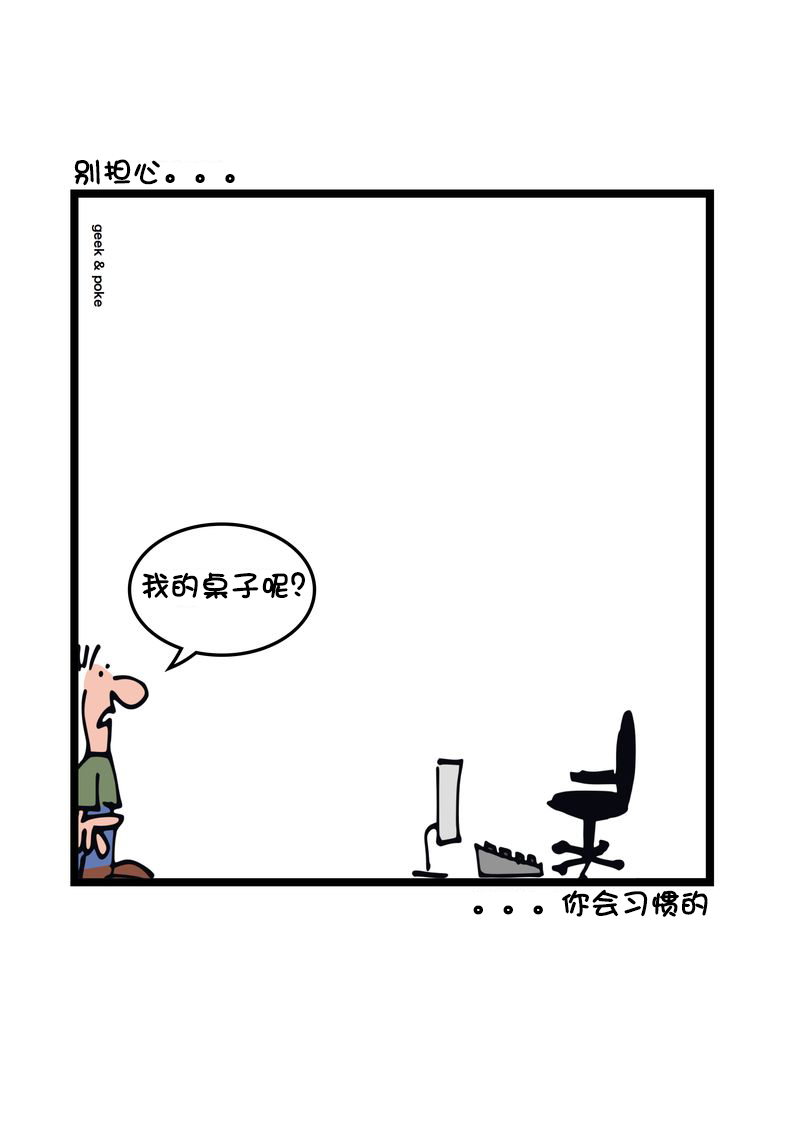
<style>
.page{position:relative;width:800px;height:1132px;background:#ffffff}
.page>*{position:absolute;margin:0}
.t1{font:29.2px "DFShaoNvW5";color:#000000;font-weight:bold}
</style>
<div class="page">
<p class="t1" style="left:74px;top:159px;width:161px;height:27px">别担心。。。</p>
<p class="t1" style="left:142px;top:572px;width:163px;height:27px">我的桌子呢？</p>
<p class="t1" style="left:473px;top:889px;width:235px;height:28px">。。。你会习惯的</p>
</div>
